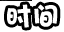
<style>
.page{position:relative;width:64px;height:32px;background:#ffffff}
.page>*{position:absolute;margin:0}
.t1{font:26px "DFPHaiBaoW12";letter-spacing:0.05em;color:#ffffff}
</style>
<div class="page">
<p class="t1" style="left:7px;top:4px;width:51px;height:24px">时间</p>
</div>
